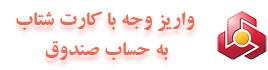
<style>
.page{position:relative;width:268px;height:70px;background:#ffffff}
.page>*{position:absolute;margin:0}
.t1{font:20.8px "BZarBold";color:#ea6953}
.t2{font:25px "BZarBold";color:#ea6953}
</style>
<div class="page">
<p class="t1" style="left:16px;top:11px;width:179px;height:49px;text-align:right"><span class="t2">     </span> واریز وجه با کارت شتاب     <br>به حساب صندوق</p>
</div>
